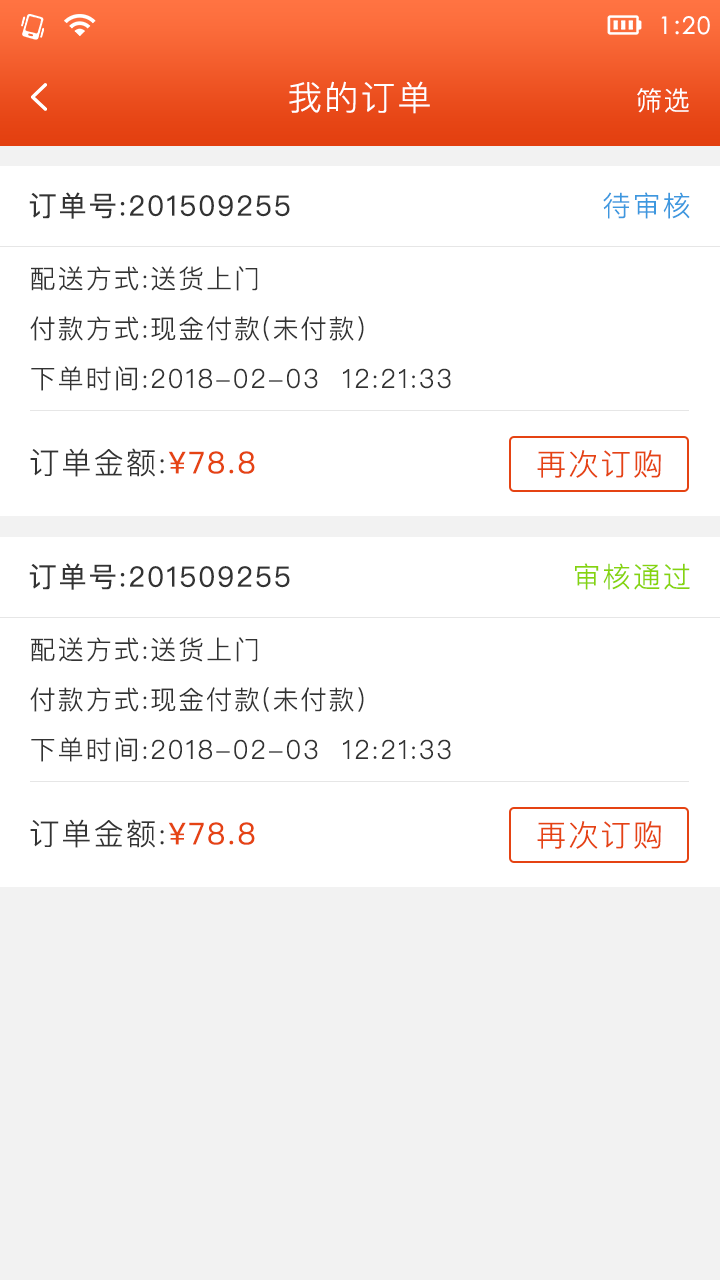
<style>
.page{position:relative;width:720px;height:1280px;background:#ffffff}
.page>*{position:absolute;margin:0}
.t1{font:24px "STXihei";letter-spacing:0.075em;color:#ffffff}
.t2{font:34px "PingFangSC-Light";letter-spacing:0.075em;color:#ffffff}
.t3{font:26px "PingFangSC-Light";letter-spacing:0.075em;color:#ffffff}
.t4{font:28px "PingFangSC-Regular";letter-spacing:0.075em;color:#333333}
.t5{font:28px "PingFangSC-Light";letter-spacing:0.075em;color:#3d98df}
.t6{font:26px/50px "PingFangSC-Light";letter-spacing:0.075em;color:#333333}
.t7{font:30px "PingFangSC-Light";letter-spacing:0.075em;color:#333333}
.t8{font:30px "PingFangSC-Regular";letter-spacing:0.075em;color:#e54313}
.t9{font:30px "PingFangSC-Light";letter-spacing:0.075em;color:#e54313}
.t10{font:28px "PingFangSC-Light";letter-spacing:0.075em;color:#86d40d}
</style>
<div class="page">
<p class="t1" style="left:661px;top:16px;width:49px;height:19px">1:20</p>
<p class="t2" style="left:289px;top:81px;width:141px;height:33px">我的订单</p>
<p class="t3" style="left:637px;top:88px;width:52px;height:25px">筛选</p>
<p class="t4" style="left:29px;top:192px;width:261px;height:27px">订单号:201509255</p>
<p class="t5" style="left:603px;top:192px;width:87px;height:27px">待审核</p>
<p class="t6" style="left:30px;top:266px;width:421px;height:125px">配送方式:送货上门<br>付款方式:现金付款(未付款)<br>下单时间:2018-02-03  12:21:33</p>
<p class="t7" style="left:30px;top:448px;width:225px;height:29px">订单金额:<span class="t8">¥78.8</span></p>
<p class="t9" style="left:537px;top:450px;width:124px;height:28px">再次订购</p>
<p class="t4" style="left:29px;top:563px;width:261px;height:27px">订单号:201509255</p>
<p class="t10" style="left:575px;top:563px;width:115px;height:27px">审核通过</p>
<p class="t6" style="left:30px;top:637px;width:421px;height:125px">配送方式:送货上门<br>付款方式:现金付款(未付款)<br>下单时间:2018-02-03  12:21:33</p>
<p class="t7" style="left:30px;top:819px;width:225px;height:29px">订单金额:<span class="t8">¥78.8</span></p>
<p class="t9" style="left:537px;top:821px;width:124px;height:28px">再次订购</p>
</div>
